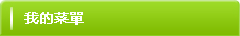
<style>
.page{position:relative;width:240px;height:36px}
.page>*{position:absolute;margin:0}
.t1{font:14px "MicrosoftYaHei";color:#ffffff;font-weight:bold}
</style>
<div class="page">
<p class="t1" style="left:24px;top:12px;width:60px;height:13px">我的菜單</p>
</div>
